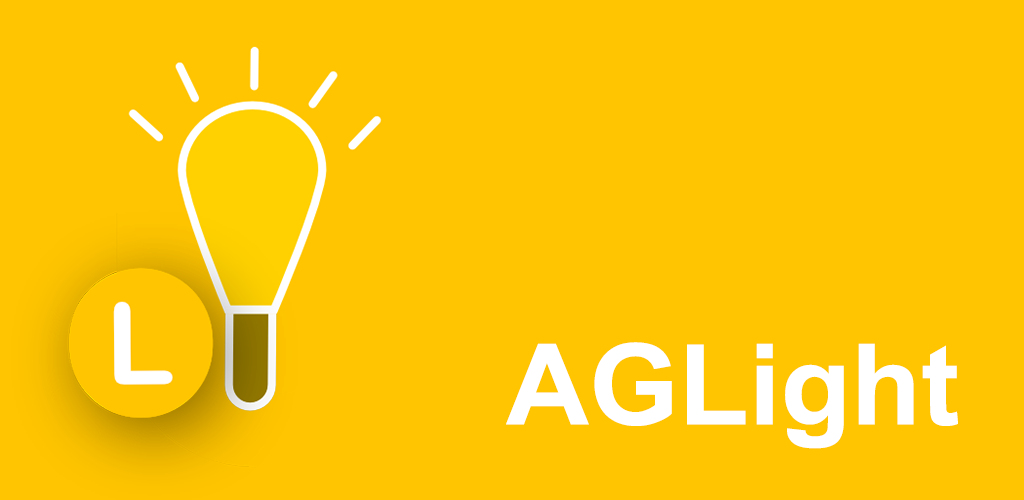
<style>
.page{position:relative;width:1024px;height:500px;background:#ffc500}
.page>*{position:absolute;margin:0}
.t1{font:112.3px "Arial-BoldMT";color:#ffffff}
</style>
<div class="page">
<p class="t1" style="left:506px;top:342px;width:452px;height:107px">AGLight</p>
</div>
